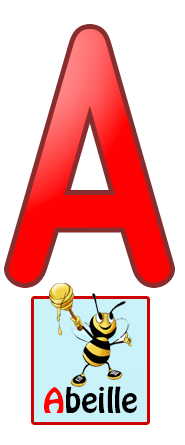
<style>
.page{position:relative;width:185px;height:445px;background:#ffffff}
.page>*{position:absolute;margin:0}
.t1{font:326px "OCRAStd"}
.t2{font:31px "HoboStd";color:#000000}
.t3{font:31px "HoboStd";color:#ff0101}
</style>
<div class="page">
<p class="t1" style="left:8px;top:29px;width:163px;height:254px">A</p>
<p class="t2" style="left:44px;top:386px;width:93px;height:27px"><span class="t3">A</span>beille</p>
</div>
